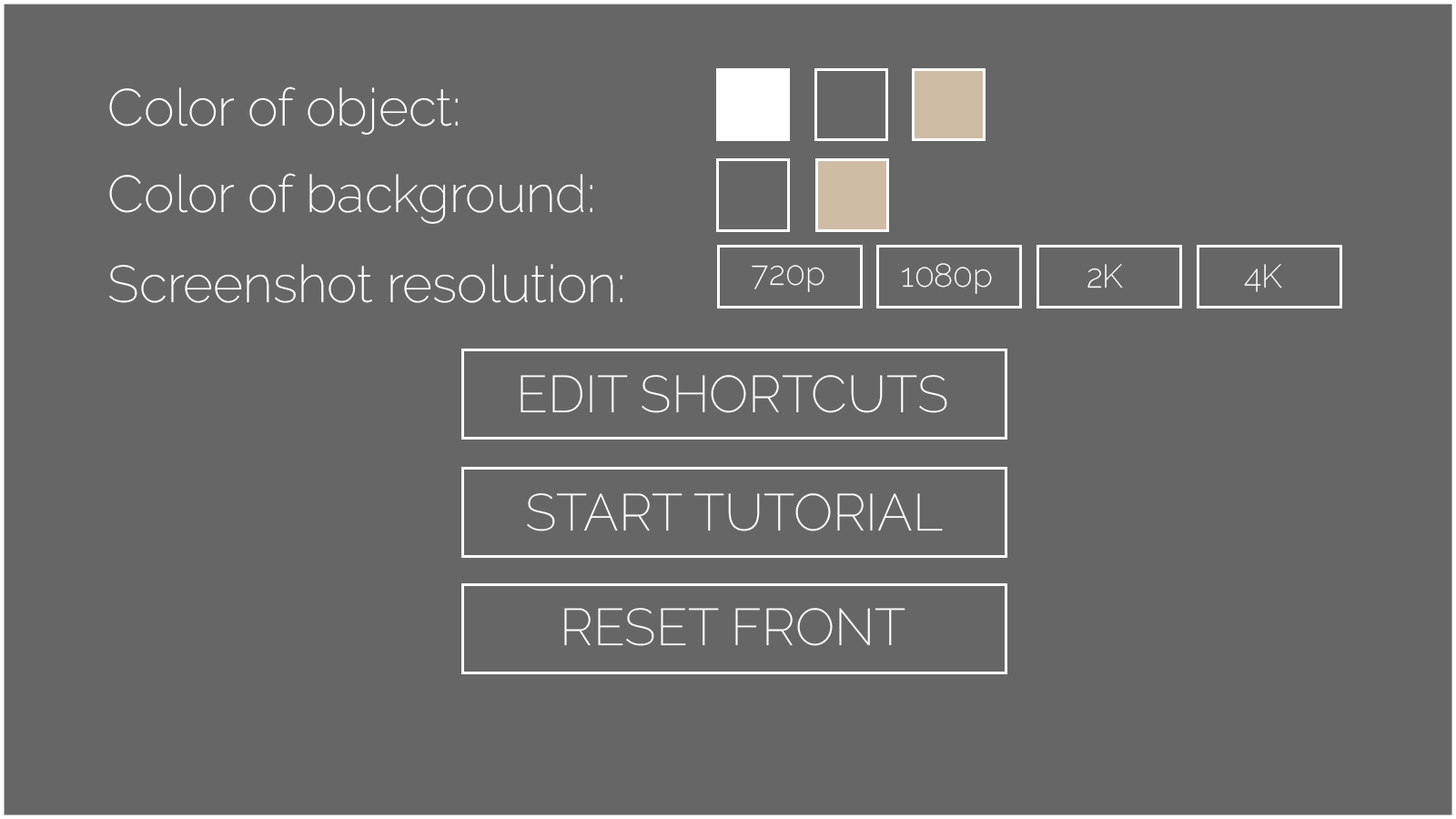
<style>
.page{position:relative;width:1456px;height:819px;background:#666666}
.page>*{position:absolute;margin:0}
.t1{font:51.9px "Raleway-ExtraLight";color:#ffffff}
.t2{font:32.8px "Raleway-ExtraLight";color:#ffffff}
</style>
<div class="page">
<p class="t1" style="left:109px;top:86px;width:349px;height:49px">Color of object:</p>
<p class="t1" style="left:109px;top:173px;width:483px;height:51px">Color of background:</p>
<p class="t1" style="left:109px;top:264px;width:513px;height:39px">Screenshot resolution:</p>
<p class="t2" style="left:752px;top:265px;width:72px;height:27px">720p</p>
<p class="t2" style="left:902px;top:263px;width:90px;height:31px">1080p</p>
<p class="t2" style="left:1087px;top:264px;width:36px;height:24px">2K</p>
<p class="t2" style="left:1244px;top:264px;width:38px;height:28px">4K</p>
</div>
